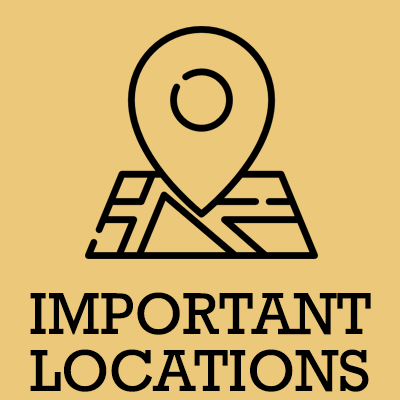
<style>
.page{position:relative;width:400px;height:400px;background:#ecc87a}
.page>*{position:absolute;margin:0}
.t1{font:60px "Rockwell";color:#000000}
</style>
<div class="page">
<p class="t1" style="left:30px;top:292px;width:341px;height:43px">IMPORTANT</p>
<p class="t1" style="left:30px;top:349px;width:339px;height:43px">LOCATIONS</p>
</div>
